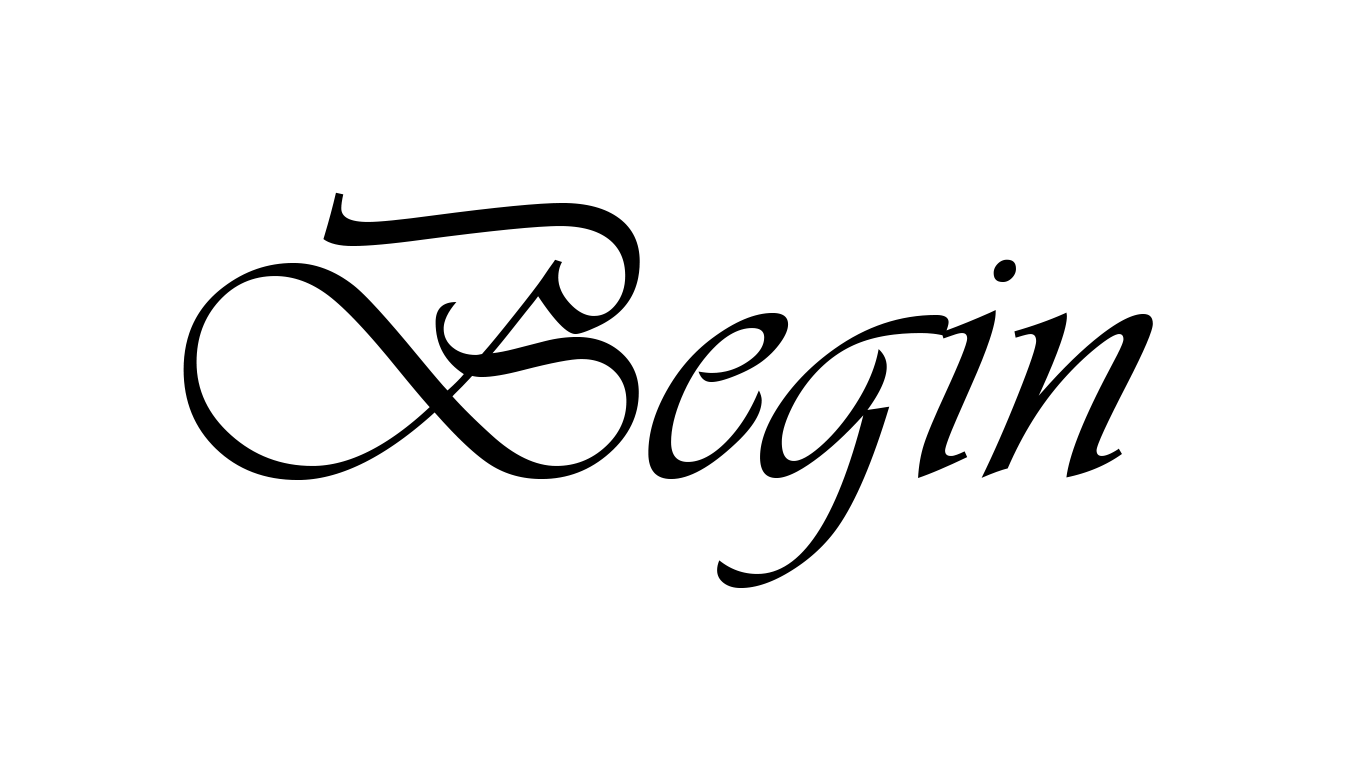
<style>
.page{position:relative;width:1366px;height:768px;background:#ffffff}
.page>*{position:absolute;margin:0}
.t1{font:400px "Vivaldii";color:#000000}
</style>
<div class="page">
<p class="t1" style="left:183px;top:192px;width:970px;height:396px">Begin</p>
</div>
